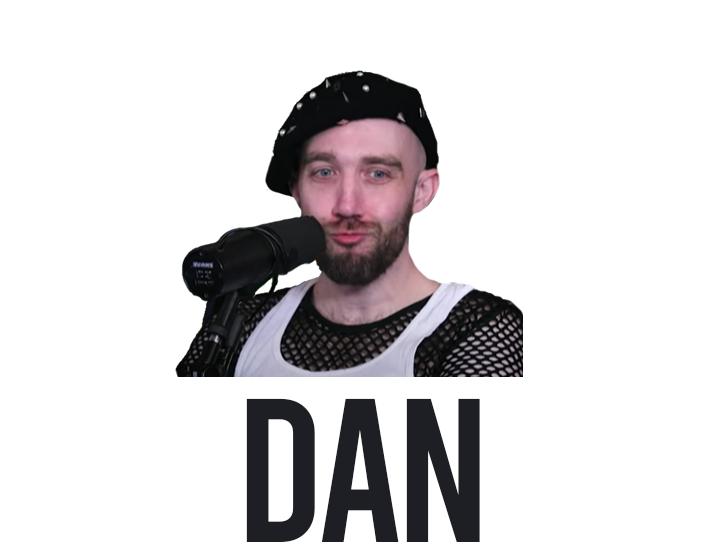
<style>
.page{position:relative;width:709px;height:559px;background:#ffffff}
.page>*{position:absolute;margin:0}
.t1{font:204.4px "Bebas-Regular";letter-spacing:-0.04em;color:#1d1f25}
</style>
<div class="page">
<p class="t1" style="left:246px;top:398px;width:234px;height:144px">DAN</p>
</div>
